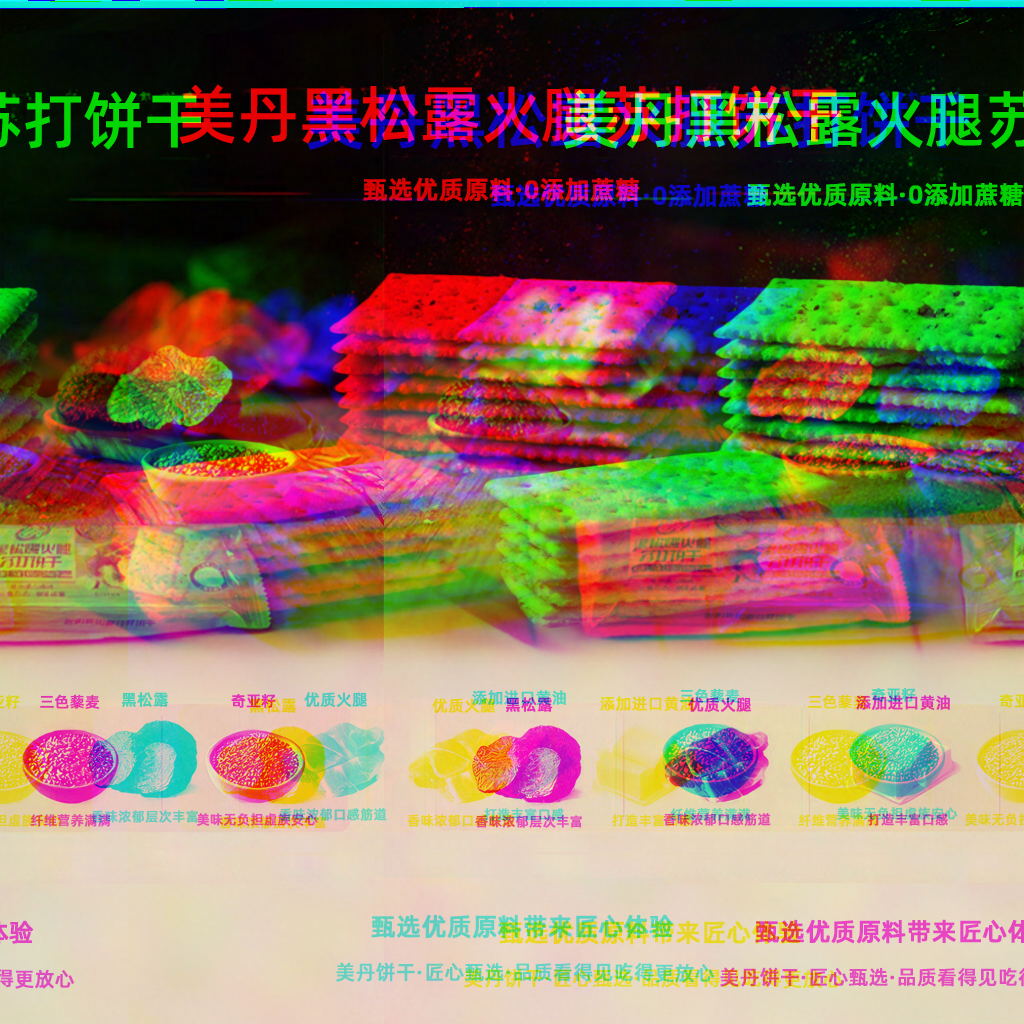
<style>
.page{position:relative;width:1024px;height:1024px}
.page>*{position:absolute;margin:0}
.t1{font:61.7px "AlibabaPuHuiTi-Medium"}
.t2{font:25px "AlibabaPuHuiTi-Medium";font-weight:bold}
.t3{font:15.8px "AlibabaPuHuiTi-Medium";font-weight:bold}
.t4{font:15px "AlibabaPuHuiTi-Medium";font-weight:bold}
.t5{font:13.3px "AlibabaPuHuiTi-Medium";font-weight:bold}
.t6{font:20px "AlibabaPuHuiTi-Medium";font-weight:bold}
</style>
<div class="page">
<p class="t1" style="left:179px;top:82px;width:662px;height:60px">美丹黑松露火腿苏打饼干</p>
<p class="t2" style="left:363px;top:175px;width:277px;height:25px">甄选优质原料·0添加蔗糖</p>
<p class="t3" style="left:472px;top:688px;width:94px;height:16px">添加进口黄油</p>
<p class="t4" style="left:871px;top:685px;width:45px;height:15px">奇亚籽</p>
<p class="t3" style="left:121px;top:690px;width:48px;height:16px">黑松露</p>
<p class="t3" style="left:304px;top:690px;width:63px;height:15px">优质火腿</p>
<p class="t5" style="left:91px;top:808px;width:107px;height:13px">香味浓郁层次丰富</p>
<p class="t5" style="left:279px;top:805px;width:108px;height:14px">香味浓郁口感筋道</p>
<p class="t5" style="left:484px;top:806px;width:80px;height:13px">打造丰富口感</p>
<p class="t5" style="left:670px;top:805px;width:81px;height:14px">纤维营养满满</p>
<p class="t2" style="left:371px;top:912px;width:303px;height:25px">甄选优质原料带来匠心体验</p>
<p class="t6" style="left:336px;top:960px;width:379px;height:21px">美丹饼干·匠心甄选·品质看得见吃得更放心</p>
</div>
